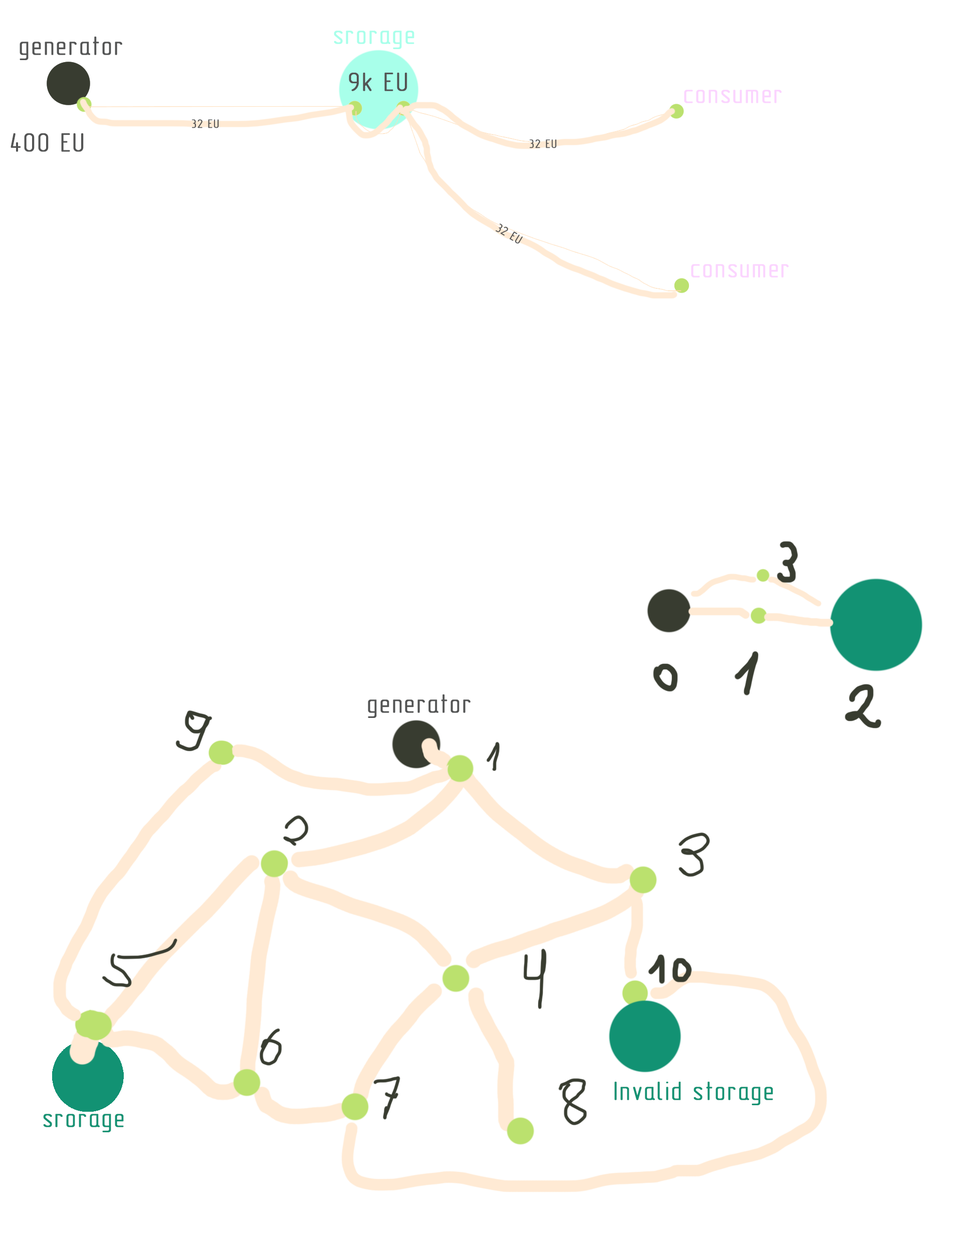
<style>
.page{position:relative;width:962px;height:1240px;background:#ffffff}
.page>*{position:absolute;margin:0}
.t1{font:26.4px "GOST_type_A";letter-spacing:0.05em;color:#535454;font-weight:bold}
.t2{font:26.4px "GOST_type_A";letter-spacing:0.05em;color:#a8ffea;font-weight:bold}
.t3{font:26.4px "GOST_type_A";letter-spacing:0.05em;color:#fbd4ff;font-weight:bold}
.t4{font:12.2px "GOST_type_A";letter-spacing:0.05em;color:#535454;font-weight:bold}
.t5{font:26.4px "GOST_type_A";letter-spacing:0.05em;color:#129273;font-weight:bold}
</style>
<div class="page">
<p class="t1" style="left:20px;top:37px;width:102px;height:23px">generator</p>
<p class="t2" style="left:334px;top:31px;width:80px;height:18px">srorage</p>
<p class="t1" style="left:349px;top:73px;width:58px;height:18px">9k EU</p>
<p class="t3" style="left:684px;top:90px;width:97px;height:13px">consumer</p>
<p class="t4" style="left:192px;top:119px;width:27px;height:9px">32 EU</p>
<p class="t1" style="left:11px;top:133px;width:73px;height:19px">400 EU</p>
<p class="t4" style="left:529px;top:139px;width:28px;height:9px">32 EU</p>
<p class="t4" style="left:495px;top:223px;width:28px;height:20px;rotate:31deg">32 EU</p>
<p class="t3" style="left:691px;top:264px;width:97px;height:14px">consumer</p>
<p class="t1" style="left:368px;top:694px;width:102px;height:24px">generator</p>
<p class="t5" style="left:614px;top:1082px;width:159px;height:23px">Invalid storage</p>
<p class="t5" style="left:43px;top:1114px;width:81px;height:18px">srorage</p>
</div>
